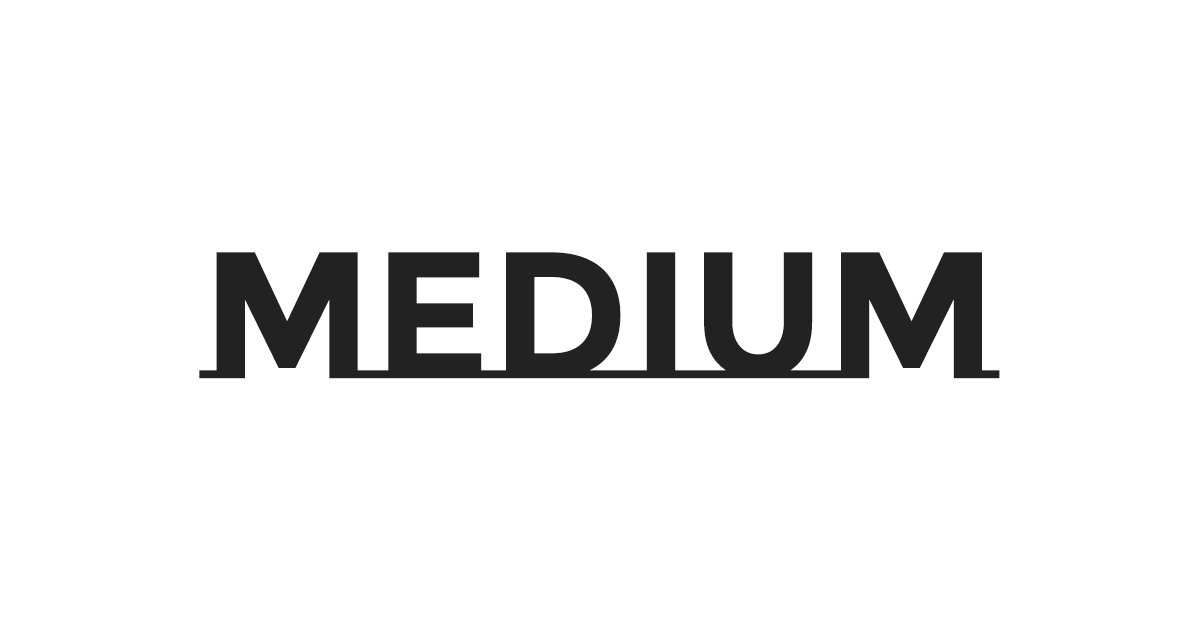
<style>
.page{position:relative;width:1200px;height:630px;background:#ffffff}
.page>*{position:absolute;margin:0}
.t1{font:180px "MontserratSubrayada-Bold";color:#222222}
</style>
<div class="page">
<p class="t1" style="left:199px;top:252px;width:801px;height:127px">MEDIUM</p>
</div>
